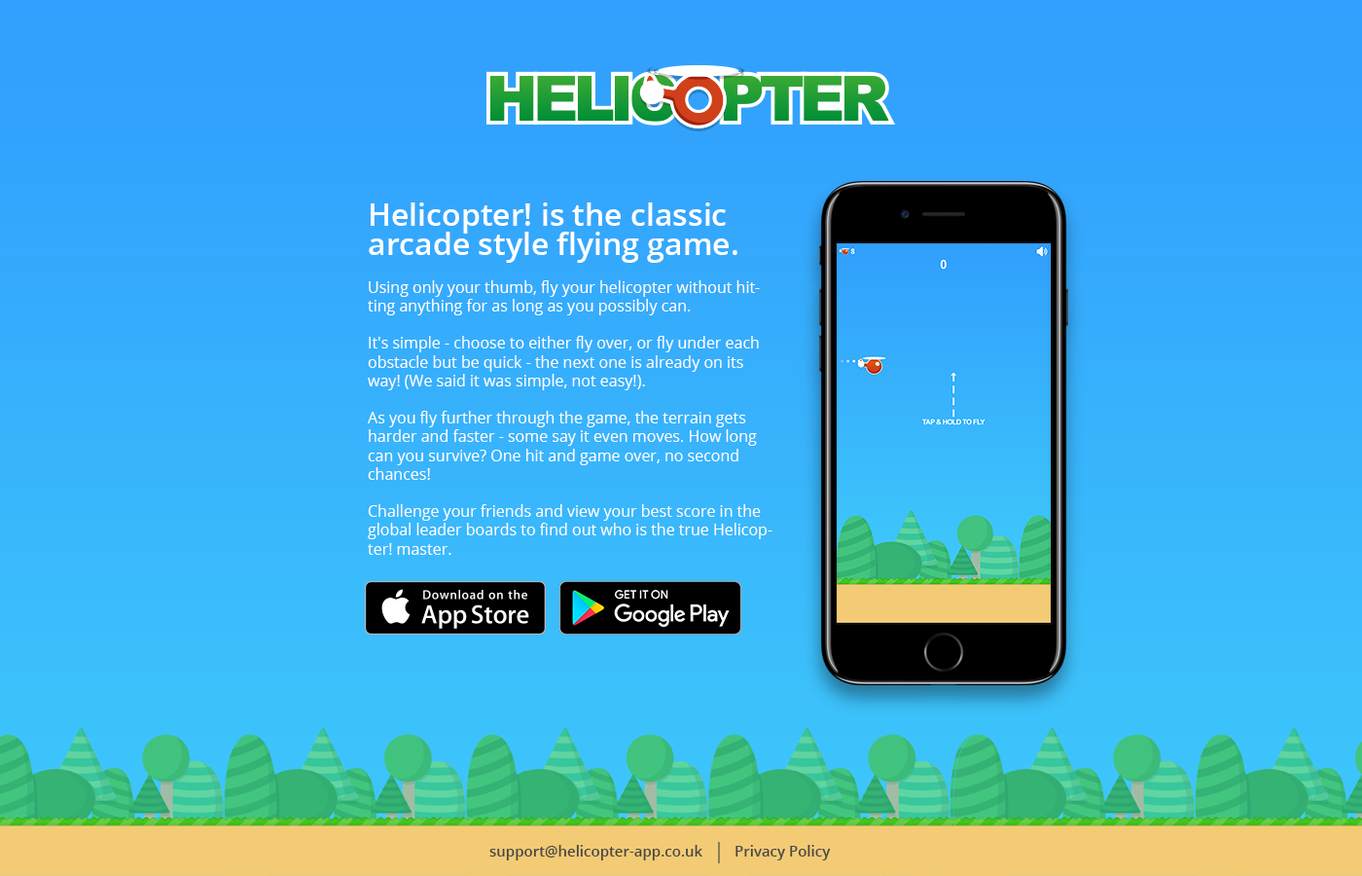
<style>
.page{position:relative;width:1362px;height:876px}
.page>*{position:absolute;margin:0}
.t1{font:15.6px "OpenSans";color:#ffffff}
.t2{font:31.1px/29.2px "OpenSans-Semibold";color:#ffffff}
.t3{font:14.6px "OpenSans-Semibold";color:#474747}
</style>
<div class="page">
<p class="t1" style="left:368px;top:202px;width:404px;height:353px"><span class="t2">Helicopter! is the classic arcade style flying game.<br></span><br>Using only your thumb, fly your helicopter without hitting anything for as long as you possibly can.<br><br>It's simple - choose to either fly over, or fly under each obstacle but be quick - the next one is already on its way! (We said it was simple, not easy!).<br><br>As you fly further through the game, the terrain gets harder and faster - some say it even moves. How long can you survive? One hit and game over, no second chances!<br><br>Challenge your friends and view your best score in the global leader boards to find out who is the true Helicopter! master.</p>
<p class="t3" style="left:489px;top:844px;width:213px;height:16px">support@helicopter-app.co.uk</p>
<p class="t3" style="left:735px;top:844px;width:96px;height:16px">Privacy Policy</p>
</div>
